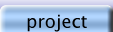
<style>
.page{position:relative;width:113px;height:32px}
.page>*{position:absolute;margin:0}
.t1{font:18px "LucidaSansUnicode";color:#000000}
</style>
<div class="page">
<p class="t1" style="left:27px;top:14px;width:60px;height:18px">project</p>
</div>
